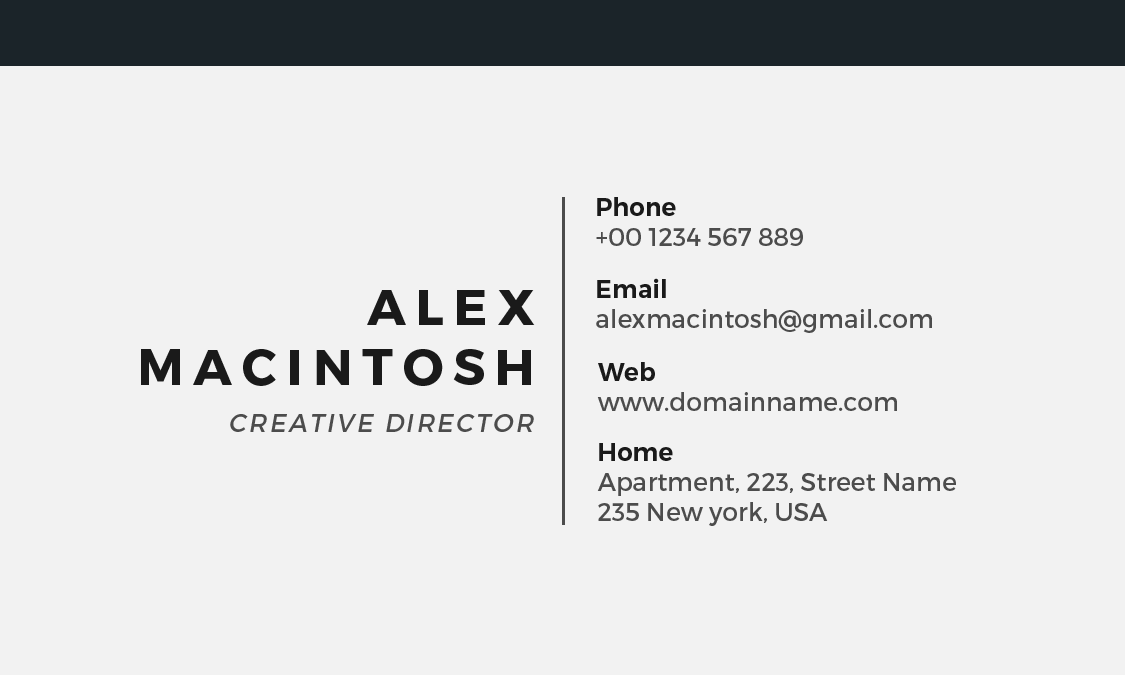
<style>
.page{position:relative;width:1125px;height:675px;background:#f2f2f2}
.page>*{position:absolute;margin:0}
.t1{font:25px "Montserrat-Regular";color:#4c4c4c}
.t2{font:25px "Montserrat-SemiBold";color:#1a1a1a}
.t3{font:50px "Montserrat-Bold";letter-spacing:0.2em;color:#1a1a1a;text-transform:uppercase}
.t4{font:25px "Montserrat-Regular";letter-spacing:0.1em;color:#4c4c4c;text-transform:uppercase;font-style:italic}
</style>
<div class="page">
<p class="t1" style="left:596px;top:197px;width:207px;height:49px"><span class="t2">Phone<br></span>+00 1234 567 889</p>
<p class="t1" style="left:596px;top:278px;width:336px;height:55px"><span class="t2">Email<br></span>alexmacintosh@gmail.com</p>
<p class="t3" style="left:141px;top:290px;width:394px;height:96px;text-align:right">AleX<br>Macintosh</p>
<p class="t1" style="left:597px;top:362px;width:300px;height:49px"><span class="t2">Web<br></span>www.domainname.com</p>
<p class="t4" style="left:230px;top:414px;width:304px;height:18px">Creative Director</p>
<p class="t1" style="left:597px;top:443px;width:359px;height:83px"><span class="t2">Home<br></span>Apartment, 223, Street Name<br>235 New york, USA</p>
</div>
